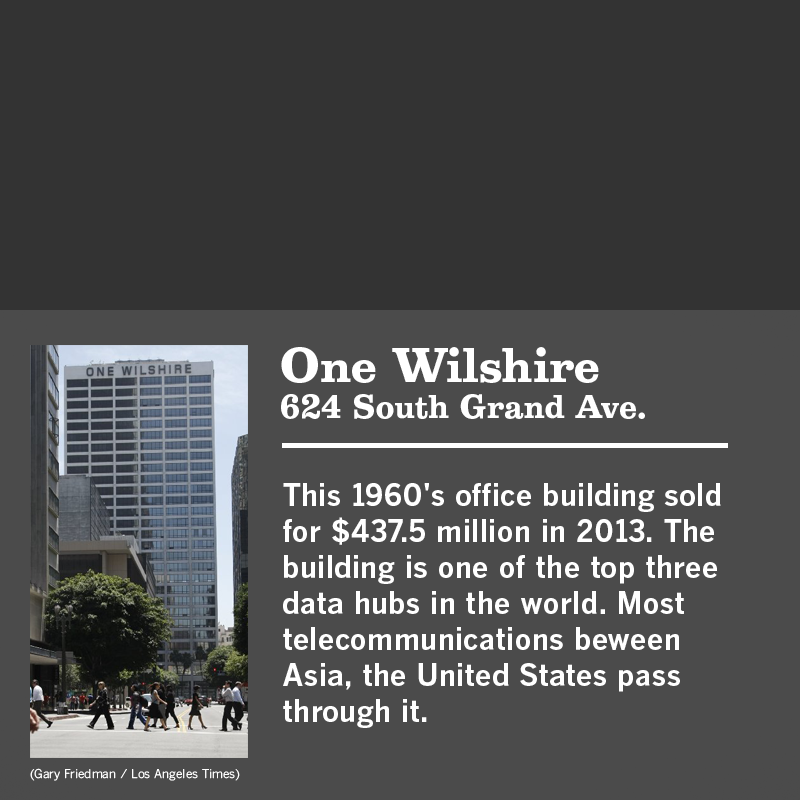
<style>
.page{position:relative;width:800px;height:800px;background:#4b4b4b}
.page>*{position:absolute;margin:0}
.t1{font:30px "Belizio-Bold";color:#ffffff}
.t2{font:44px "Belizio-Bold";color:#ffffff}
.t3{font:30px "BentonGothic-Bold";color:#ffffff}
.t4{font:12px "BentonGothicTab-Regular";color:#ffffff}
</style>
<div class="page">
<p class="t1" style="left:281px;top:347px;width:364px;height:72px"><span class="t2">One Wilshire<br></span>624 South Grand Ave.</p>
<p class="t3" style="left:283px;top:483px;width:438px;height:245px">This 1960's office building sold for $437.5 million in 2013. The building is one of the top three data hubs in the world. Most telecommunications beween Asia, the United States pass through it.</p>
<p class="t4" style="left:30px;top:768px;width:210px;height:13px">(Gary Friedman / Los Angeles Times)</p>
</div>
